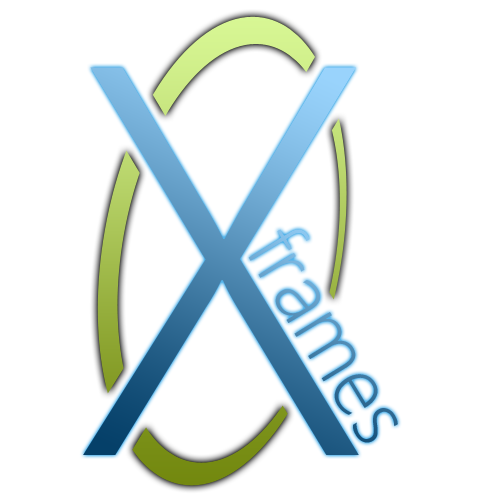
<style>
.page{position:relative;width:500px;height:500px;background:#ffffff}
.page>*{position:absolute;margin:0}
.t1{font:83.1px "SegoeUI-Light"}
</style>
<div class="page">
<p class="t1" style="left:248px;top:229px;width:150px;height:214px;rotate:59deg">frames</p>
</div>
